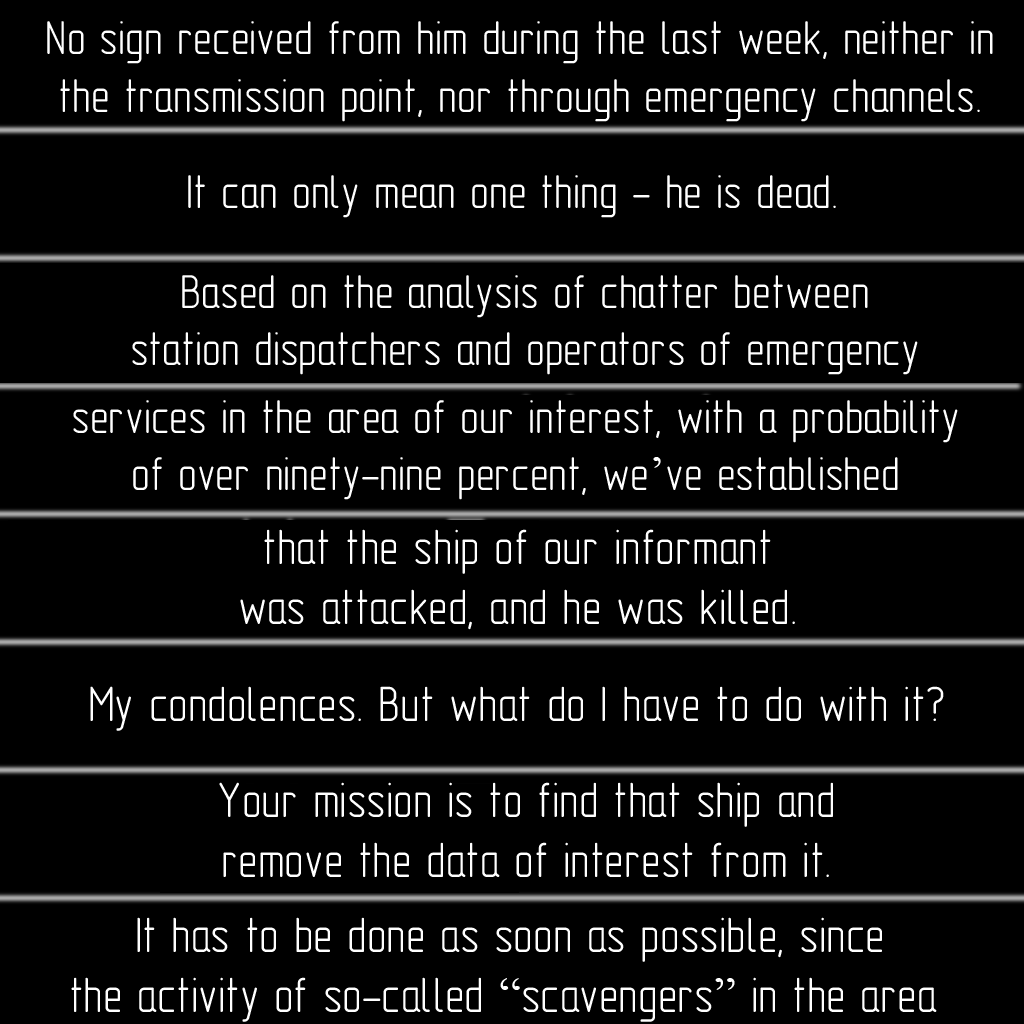
<style>
.page{position:relative;width:1024px;height:1024px;background:#000000}
.page>*{position:absolute;margin:0}
.t1{font:48px "GOST-2.304-81typeA";color:#ffffff}
.t2{font:48px "TimesNewRomanPSMT";color:#ffffff}
.t3{font:50px "GOST-2.304-81typeA";color:#ffffff}
.t4{font:50px "TimesNewRomanPSMT";color:#ffffff}
</style>
<div class="page">
<p class="t1" style="left:47px;top:21px;width:946px;height:101px;text-align:center">No sign received from him during the last week, neither in<br>the transmission point, nor through emergency channels.</p>
<p class="t1" style="left:188px;top:175px;width:648px;height:43px">It can only mean one thing - he is dead.</p>
<p class="t1" style="left:132px;top:275px;width:786px;height:100px;text-align:center">Based on the analysis of chatter between<br>station dispatchers and operators of emergency</p>
<p class="t1" style="left:73px;top:400px;width:885px;height:100px;text-align:center">services in the area of our interest, with a probability<br>of over ninety-nine percent, we<span class="t2">’</span>ve established</p>
<p class="t3" style="left:240px;top:529px;width:555px;height:101px;text-align:center">that the ship of our informant<br>was attacked, and he was killed.</p>
<p class="t3" style="left:90px;top:686px;width:854px;height:45px">My condolences. But what do I have to do with it?</p>
<p class="t3" style="left:219px;top:782px;width:614px;height:95px;text-align:center">Your mission is to find that ship and<br>remove the data of interest from it.</p>
<p class="t3" style="left:71px;top:917px;width:866px;height:105px;text-align:center">It has to be done as soon as possible, since<br>the activity of so-called <span class="t4">“</span>scavengers<span class="t4">”</span> in the area</p>
</div>
